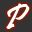
<style>
.page{position:relative;width:32px;height:32px;background:#333333}
.page>*{position:absolute;margin:0}
.t1{font:36px "Pristina-Regular";color:#ffffff;font-weight:bold;font-style:italic}
</style>
<div class="page">
<p class="t1" style="left:6px;top:3px;width:24px;height:26px">P</p>
</div>
